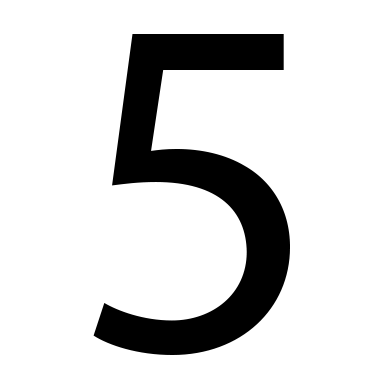
<style>
.page{position:relative;width:384px;height:384px;background:#ffffff}
.page>*{position:absolute;margin:0}
.t1{font:486.1px "MyriadPro-Regular";color:#000000}
</style>
<div class="page">
<p class="t1" style="left:93px;top:34px;width:197px;height:321px">5</p>
</div>
